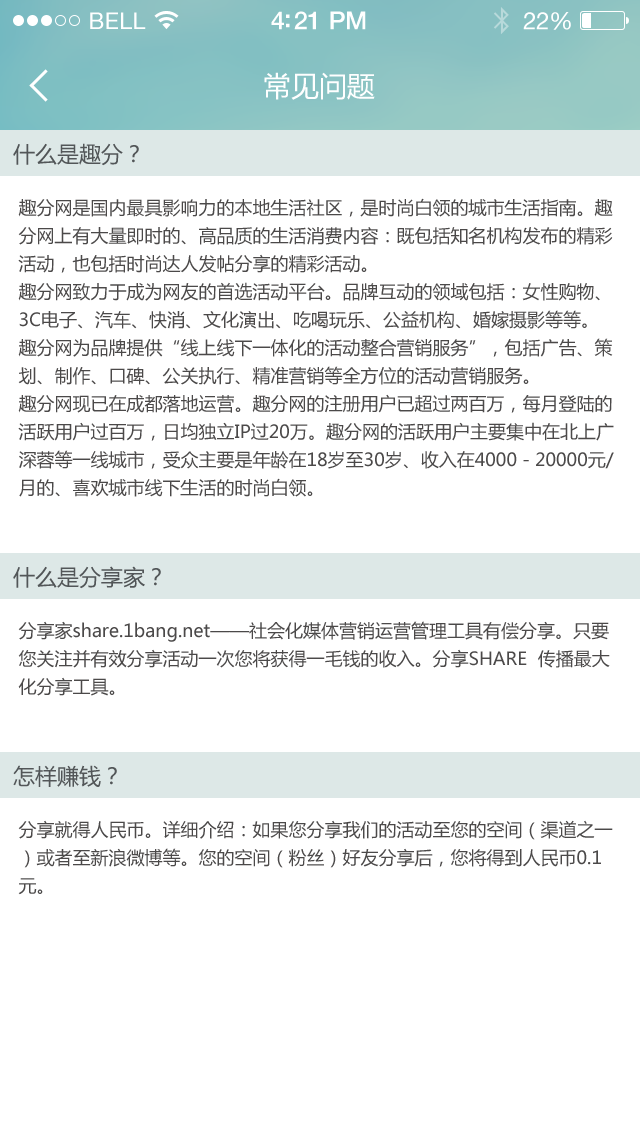
<style>
.page{position:relative;width:640px;height:1136px;background:#ffffff}
.page>*{position:absolute;margin:0}
.t1{font:23px "HelveticaNeue";letter-spacing:0.02em;color:#ffffff}
.t2{font:25px "HelveticaNeue-Medium";letter-spacing:-0.02em;color:#ffffff}
.t3{font:24px "HelveticaNeue";letter-spacing:-0.02em;color:#ffffff}
.t4{font:28px "MicrosoftYaHei";color:#ffffff}
.t5{font:22px "MicrosoftYaHei";color:#525658}
.t6{font:18px/28px "MicrosoftYaHei";color:#4b4949}
</style>
<div class="page">
<p class="t1" style="left:90px;top:12px;width:56px;height:17px">BELL</p>
<p class="t2" style="left:271px;top:11px;width:95px;height:19px">4:21 PM</p>
<p class="t3" style="left:523px;top:12px;width:48px;height:18px">22%</p>
<p class="t4" style="left:264px;top:72px;width:111px;height:28px">常见问题</p>
<p class="t5" style="left:13px;top:143px;width:126px;height:23px">什么是趣分？</p>
<p class="t6" style="left:18px;top:198px;width:596px;height:299px">趣分网是国内最具影响力的本地生活社区，是时尚白领的城市生活指南。趣分网上有大量即时的、高品质的生活消费内容：既包括知名机构发布的精彩活动，也包括时尚达人发帖分享的精彩活动。<br>趣分网致力于成为网友的首选活动平台。品牌互动的领域包括：女性购物、3C电子、汽车、快消、文化演出、吃喝玩乐、公益机构、婚嫁摄影等等。趣分网为品牌提供“线上线下一体化的活动整合营销服务”，包括广告、策划、制作、口碑、公关执行、精准营销等全方位的活动营销服务。<br>趣分网现已在成都落地运营。趣分网的注册用户已超过两百万，每月登陆的活跃用户过百万，日均独立IP过20万。趣分网的活跃用户主要集中在北上广深蓉等一线城市，受众主要是年龄在18岁至30岁、收入在4000－20000元/月的、喜欢城市线下生活的时尚白领。</p>
<p class="t5" style="left:13px;top:566px;width:148px;height:23px">什么是分享家？</p>
<p class="t6" style="left:18px;top:621px;width:592px;height:75px">分享家share.1bang.net——社会化媒体营销运营管理工具有偿分享。只要您关注并有效分享活动一次您将获得一毛钱的收入。分享SHARE  传播最大化分享工具。</p>
<p class="t5" style="left:13px;top:765px;width:104px;height:22px">怎样赚钱？</p>
<p class="t6" style="left:18px;top:820px;width:595px;height:75px">分享就得人民币。详细介绍：如果您分享我们的活动至您的空间（渠道之一）或者至新浪微博等。您的空间（粉丝）好友分享后，您将得到人民币0.1元。</p>
</div>
